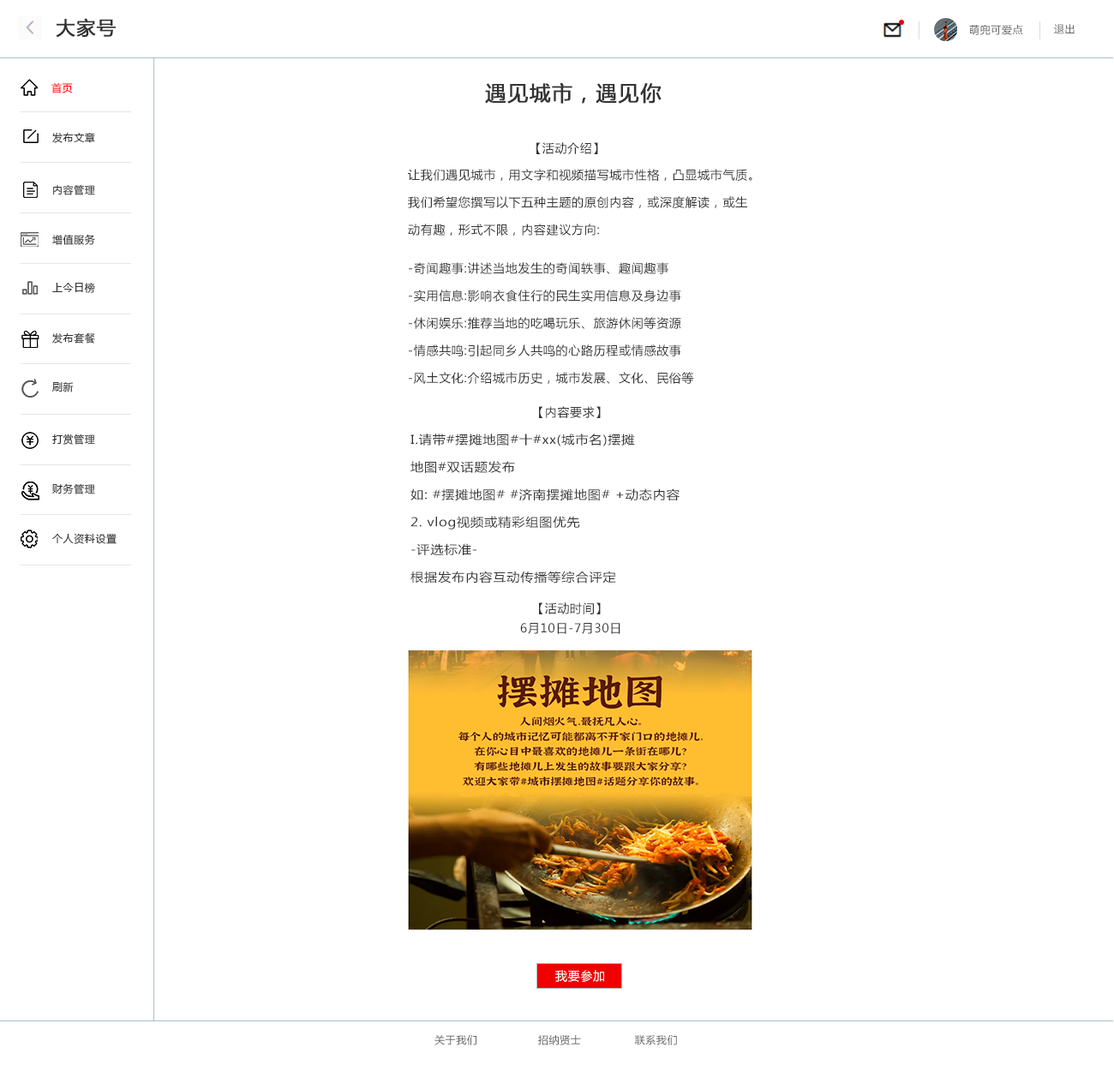
<style>
.page{position:relative;width:1114px;height:1071px;background:#ffffff}
.page>*{position:absolute;margin:0}
.t1{font:18.8px "MicrosoftYaHei";letter-spacing:0.05em;color:#333333;font-weight:bold}
.t2{font:10.3px "MicrosoftYaHei";letter-spacing:0.05em;color:#666666}
.t3{font:10.3px "MicrosoftYaHei";letter-spacing:0.05em;color:#ff0000}
.t4{font:20.6px "MicrosoftYaHei";letter-spacing:0.05em;color:#333333;font-weight:bold}
.t5{font:10.3px "MicrosoftYaHei";letter-spacing:0.05em;color:#333333}
.t6{font:12px "MicrosoftYaHei";letter-spacing:0.05em;color:#333333}
.t7{font:12px/10.3px "MicrosoftYaHei";letter-spacing:0.05em;color:#333333}
.t8{font:12px/10.3px "MicrosoftYaHei";letter-spacing:0.05em;color:#333333;scale:1.09 1}
.t9{font:12px "MicrosoftYaHei";letter-spacing:0.05em;color:#ffffff}
</style>
<div class="page">
<p class="t1" style="left:56px;top:18px;width:60px;height:20px">大家号</p>
<p class="t2" style="left:969px;top:25px;width:54px;height:10px">萌兜可爱点</p>
<p class="t2" style="left:1054px;top:24px;width:20px;height:10px">退出</p>
<p class="t3" style="left:51px;top:82px;width:22px;height:11px">首页</p>
<p class="t4" style="left:485px;top:82px;width:176px;height:22px">遇见城市，遇见你</p>
<p class="t5" style="left:52px;top:132px;width:43px;height:11px">发布文章</p>
<p class="t6" style="left:536px;top:142px;width:62px;height:12px">【活动介绍】</p>
<p class="t7" style="left:408px;top:169px;width:344px;height:67px">让我们遇见城市，用文字和视频描写城市性格，凸显城市气质。<br>我们希望您撰写以下五种主题的原创内容，或深度解读，或生<br>动有趣，形式不限，内容建议方向:</p>
<p class="t5" style="left:53px;top:184px;width:42px;height:11px">内容管理</p>
<p class="t5" style="left:52px;top:234px;width:43px;height:11px">增值服务</p>
<p class="t7" style="left:409px;top:262px;width:285px;height:122px">-奇闻趣事:讲述当地发生的奇闻轶事、趣闻趣事<br>-实用信息:影响衣食住行的民生实用信息及身边事<br>-休闲娱乐:推荐当地的吃喝玩乐、旅游休闲等资源<br>-情感共鸣:引起同乡人共鸣的心路历程或情感故事<br>-风土文化:介绍城市历史，城市发展、文化、民俗等</p>
<p class="t5" style="left:52px;top:282px;width:43px;height:11px">上今日榜</p>
<p class="t5" style="left:52px;top:332px;width:43px;height:12px">发布套餐</p>
<p class="t5" style="left:52px;top:382px;width:22px;height:10px">刷新</p>
<p class="t6" style="left:539px;top:406px;width:61px;height:12px">【内容要求】</p>
<p class="t5" style="left:52px;top:433px;width:43px;height:12px">打赏管理</p>
<p class="t8" style="left:410px;top:433px;width:269px;height:150px">I.请带#摆摊地图#十#xx(城市名)摆摊<br>地图#双话题发布<br>如: #摆摊地图# #济南摆摊地图# +动态内容<br>2. vlog视频或精彩组图优先<br>-评选标准-<br>根据发布内容互动传播等综合评定</p>
<p class="t5" style="left:52px;top:483px;width:43px;height:11px">财务管理</p>
<p class="t5" style="left:52px;top:533px;width:65px;height:11px">个人资料设置</p>
<p class="t6" style="left:539px;top:602px;width:61px;height:12px">【活动时间】</p>
<p class="t6" style="left:520px;top:623px;width:100px;height:11px">6月10日-7月30日</p>
<p class="t9" style="left:555px;top:970px;width:49px;height:12px">我要参加</p>
<p class="t2" style="left:434px;top:1035px;width:243px;height:10px">关于我们                 招纳贤士               联系我们</p>
</div>
